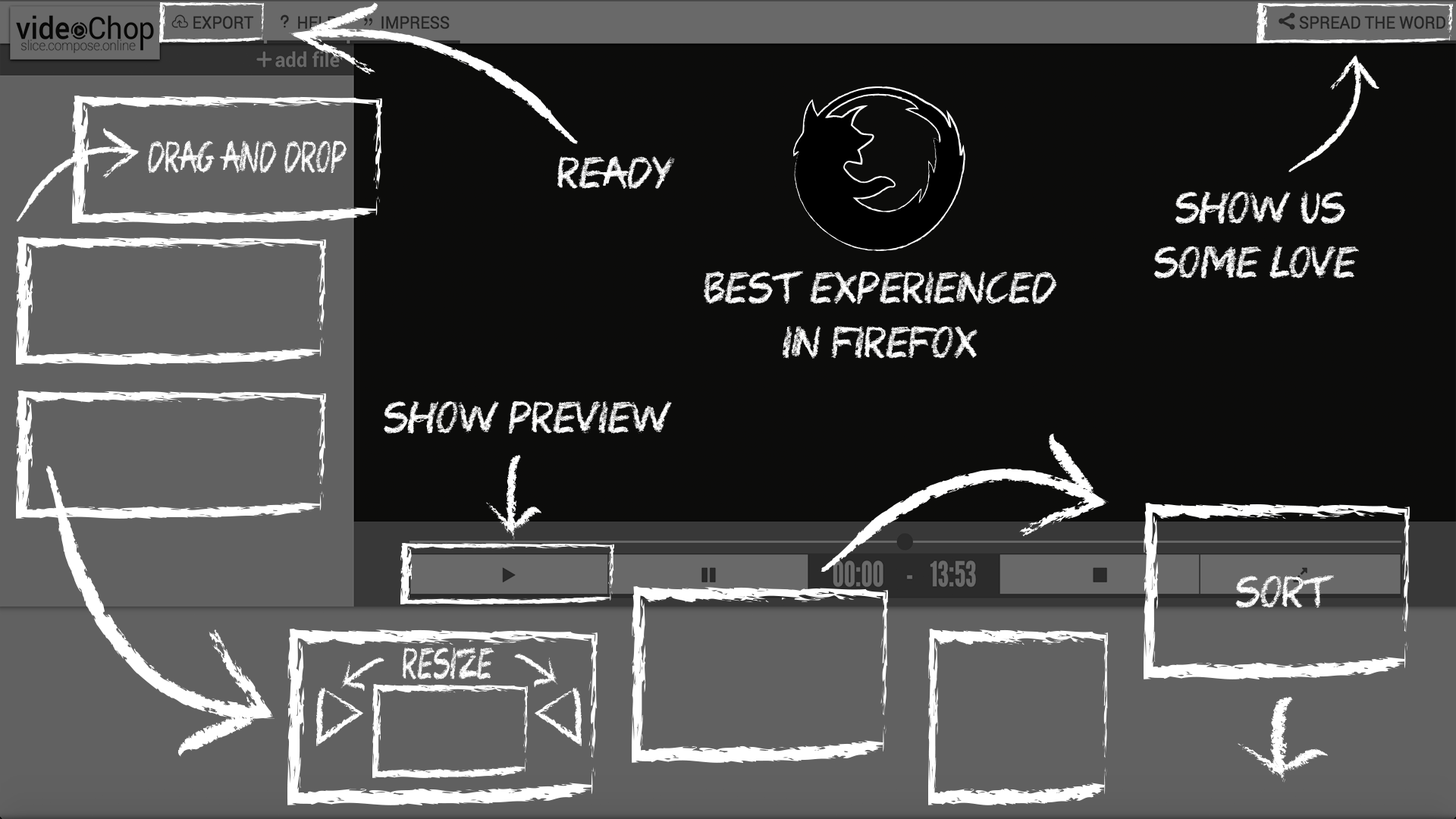
<style>
.page{position:relative;width:1456px;height:819px;background:#0c0c0b}
.page>*{position:absolute;margin:0}
.t1{font:45.5px "Colored-Crayons";color:#ffffff;scale:0.68 1}
.t2{font:45.5px "Colored-Crayons";color:#ffffff}
</style>
<div class="page">
<p class="t1" style="left:148px;top:140px;width:199px;height:33px">Drag and Drop</p>
<p class="t2" style="left:557px;top:156px;width:118px;height:33px">Ready</p>
<p class="t2" style="left:1153px;top:190px;width:206px;height:88px;text-align:right">SHOW US <br>Some LOVE</p>
<p class="t2" style="left:704px;top:271px;width:353px;height:88px;text-align:center">Best Experienced<br>in firefox</p>
<p class="t2" style="left:384px;top:401px;width:288px;height:33px">Show Preview</p>
<p class="t2" style="left:1235px;top:575px;width:99px;height:33px">SORT</p>
<p class="t1" style="left:402px;top:647px;width:92px;height:32px">Resize</p>
</div>
